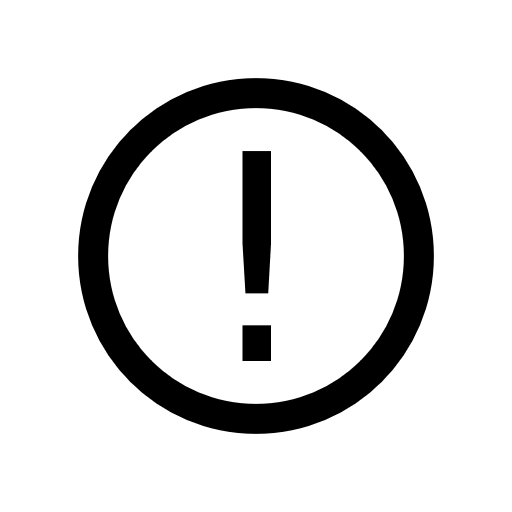
<style>
.page{position:relative;width:512px;height:512px;background:#ffffff}
.page>*{position:absolute;margin:0}
.t1{font:288px "DejaVuSans";color:#000000}
</style>
<div class="page">
<p class="t1" style="left:242px;top:151px;width:29px;height:210px">!</p>
</div>
